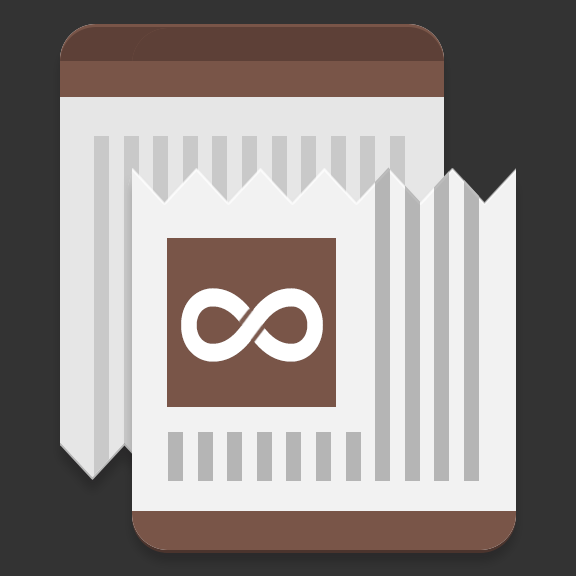
<style>
.page{position:relative;width:576px;height:576px;background:#333333}
.page>*{position:absolute;margin:0}
.t1{font:173.9px "NotoSansCJKsc-Bold";color:#ffffff;scale:0.86 1}
</style>
<div class="page">
<p class="t1" style="left:181px;top:288px;width:142px;height:74px">∞</p>
</div>
